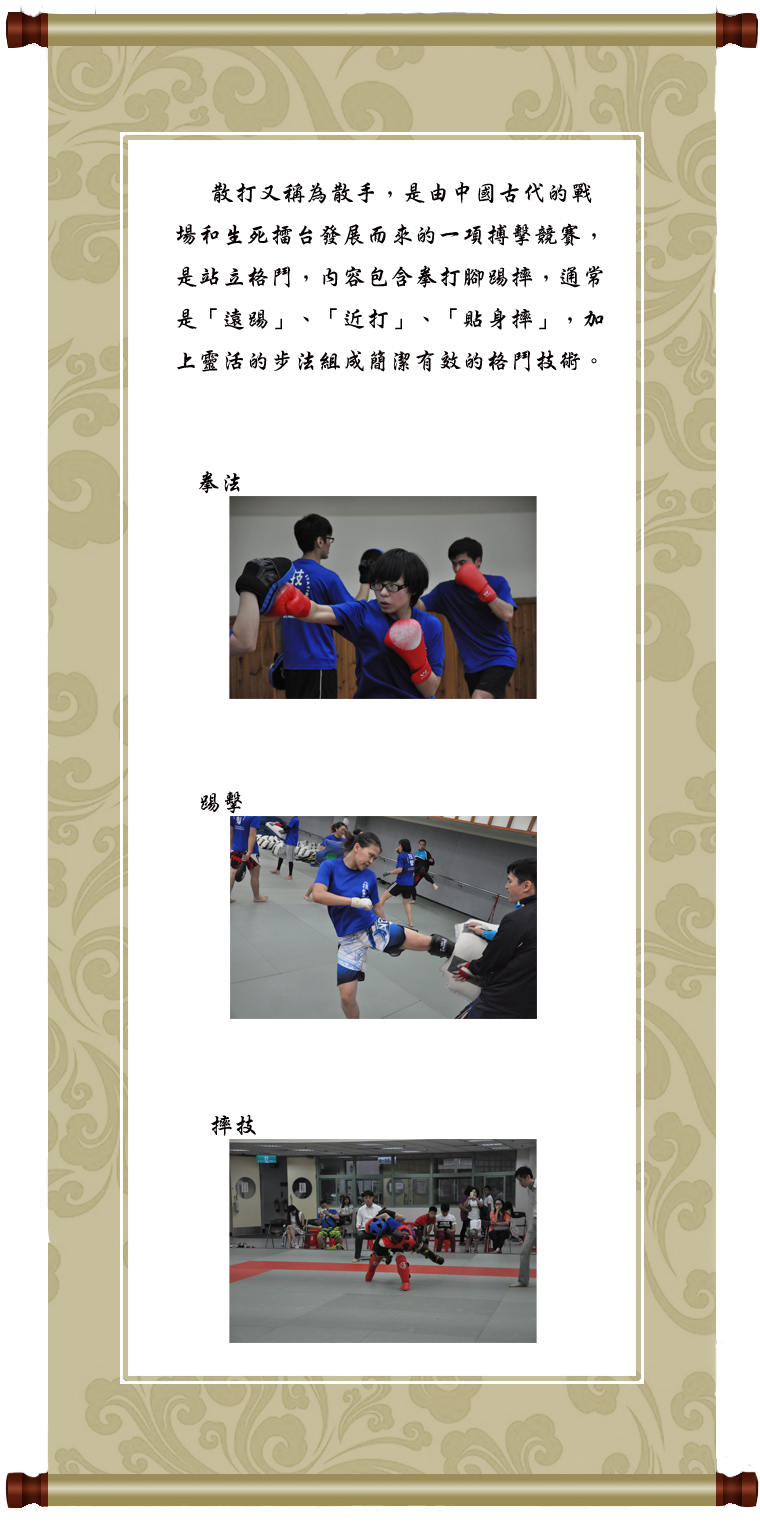
<style>
.page{position:relative;width:760px;height:1530px;background:#ffffff}
.page>*{position:absolute;margin:0}
.t1{font:24px "DFXingKai-W5-WINP-BF";color:#070000}
</style>
<div class="page">
<p class="t1" style="left:176px;top:182px;width:428px;height:190px">散打又稱為散手，是由中國古代的戰<br>場和生死擂台發展而來的一項搏擊競賽，<br>是站立格鬥，內容包含拳打腳踢摔，通常<br>是「遠踢」、「近打」、「貼身摔」，加<br>上靈活的步法組成簡潔有效的格鬥技術。</p>
<p class="t1" style="left:198px;top:471px;width:42px;height:23px">拳法</p>
<p class="t1" style="left:200px;top:791px;width:42px;height:23px">踢擊</p>
<p class="t1" style="left:211px;top:1114px;width:45px;height:22px">摔技</p>
</div>
